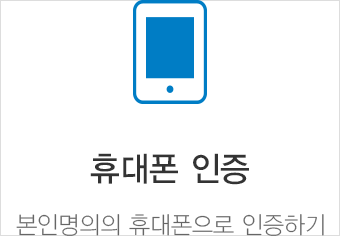
<style>
.page{position:relative;width:340px;height:236px;background:#ffffff}
.page>*{position:absolute;margin:0}
.t1{font:34px "YDVYGO33";color:#333333;scale:0.95 1}
.t2{font:24px "YDVYGO31";color:#666666;scale:0.95 1}
</style>
<div class="page">
<p class="t1" style="left:90px;top:153px;width:159px;height:32px">휴대폰 인증</p>
<p class="t2" style="left:16px;top:214px;width:308px;height:22px">본인명의의 휴대폰으로 인증하기</p>
</div>
